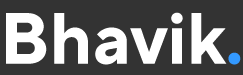
<style>
.page{position:relative;width:243px;height:75px;background:#333333}
.page>*{position:absolute;margin:0}
.t1{font:72px "TTNormsPro-Bold";color:#ffffff}
.t2{font:72px "TTNormsPro-Bold";color:#3399ff}
</style>
<div class="page">
<p class="t1" style="left:6px;top:12px;width:235px;height:53px">Bhavik<span class="t2">.</span></p>
</div>
